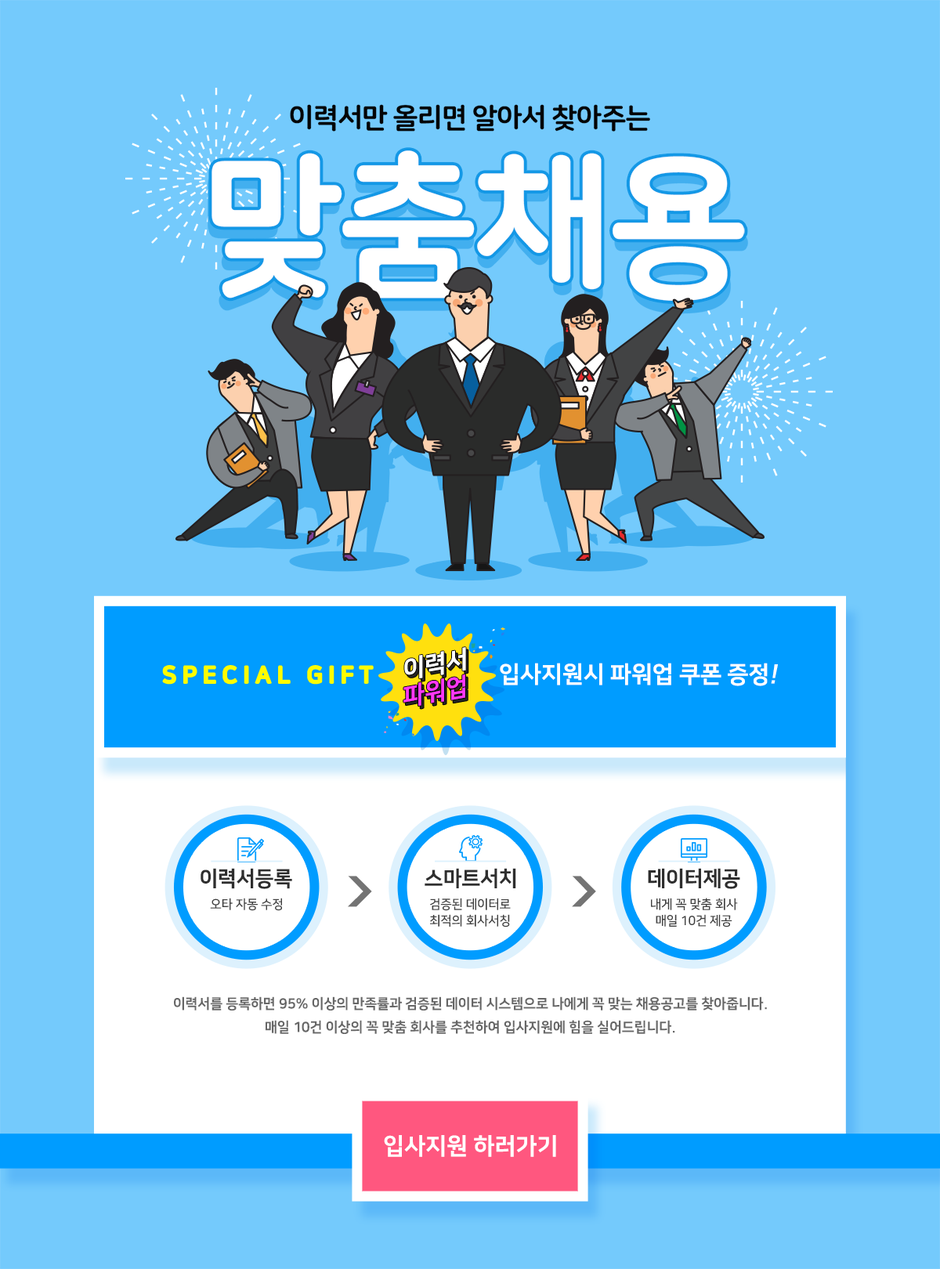
<style>
.page{position:relative;width:940px;height:1269px;background:#74cafc}
.page>*{position:absolute;margin:0}
.t1{font:28.2px "NanumSquareRoundEB";letter-spacing:-0.04em;color:#040404;text-transform:uppercase}
.t2{font:155.2px "NanumSquareRoundEB";letter-spacing:-0.04em;color:#ffffff;text-transform:uppercase}
.t3{font:24.8px "NanumSquareEB";letter-spacing:-0.01em;color:#ffffff;text-transform:uppercase}
.t4{font:24.8px "NanumSquareEB";letter-spacing:-0.01em;text-transform:uppercase}
.t5{font:23.5px "NanumSquareEB";letter-spacing:0.23em;color:#fffc00;text-transform:uppercase}
.t6{font:23.5px "NanumSquareEB";letter-spacing:-0.01em;color:#ffffff;text-transform:uppercase}
.t7{font:23.5px "NanumSquareEB";letter-spacing:-0.01em;color:#ffffff;text-transform:uppercase;font-style:italic}
.t8{font:24.8px "NanumSquareEB";letter-spacing:-0.01em;color:#fd38f6;text-transform:uppercase}
.t9{font:21.2px "NanumSquareEB";letter-spacing:-0.01em;color:#2e2e2e;text-transform:uppercase}
.t10{font:12.7px "NanumSquareB";letter-spacing:-0.01em;color:#3f3f3f;text-transform:uppercase}
.t11{font:12.7px/16.5px "NanumSquareB";letter-spacing:-0.01em;color:#3f3f3f;text-transform:uppercase}
.t12{font:14.1px/23.5px "NanumSquareEB";letter-spacing:-0.01em;color:#666666;text-transform:uppercase}
</style>
<div class="page">
<p class="t1" style="left:290px;top:104px;width:360px;height:28px">이력서만 올리면 알아서 찾아주는</p>
<p class="t2" style="left:211px;top:150px;width:534px;height:151px">맞춤채용</p>
<p class="t3" style="left:404px;top:647px;width:62px;height:31px;rotate:-10deg">이력서</p>
<p class="t4" style="left:406px;top:649px;width:62px;height:32px;rotate:-10deg">이력서</p>
<p class="t5" style="left:163px;top:666px;width:210px;height:18px">special gift</p>
<p class="t6" style="left:500px;top:663px;width:278px;height:23px">입사지원시 파워업 쿠폰 증정<span class="t7">!</span></p>
<p class="t8" style="left:403px;top:674px;width:62px;height:32px;rotate:-10deg">파워업</p>
<p class="t4" style="left:406px;top:677px;width:62px;height:32px;rotate:-10deg">파워업</p>
<p class="t9" style="left:200px;top:868px;width:92px;height:21px">이력서등록</p>
<p class="t9" style="left:424px;top:868px;width:92px;height:20px">스마트서치</p>
<p class="t9" style="left:648px;top:868px;width:92px;height:21px">데이터제공</p>
<p class="t10" style="left:210px;top:898px;width:72px;height:13px">오타 자동 수정</p>
<p class="t11" style="left:430px;top:898px;width:81px;height:29px;text-align:center">검증된 데이터로<br>최적의 회사서칭</p>
<p class="t11" style="left:651px;top:898px;width:87px;height:29px;text-align:center">내게 꼭 맞춤 회사<br>매일 10건 제공</p>
<p class="t12" style="left:174px;top:996px;width:593px;height:38px;text-align:center">이력서를 등록하면 95% 이상의 만족률과 검증된 데이터 시스템으로 나에게 꼭 맞는 채용공고를 찾아줍니다.<br>매일 10건 이상의 꼭 맞춤 회사를 추천하여 입사지원에 힘을 실어드립니다.</p>
<p class="t6" style="left:384px;top:1135px;width:172px;height:22px">입사지원 하러가기</p>
</div>
